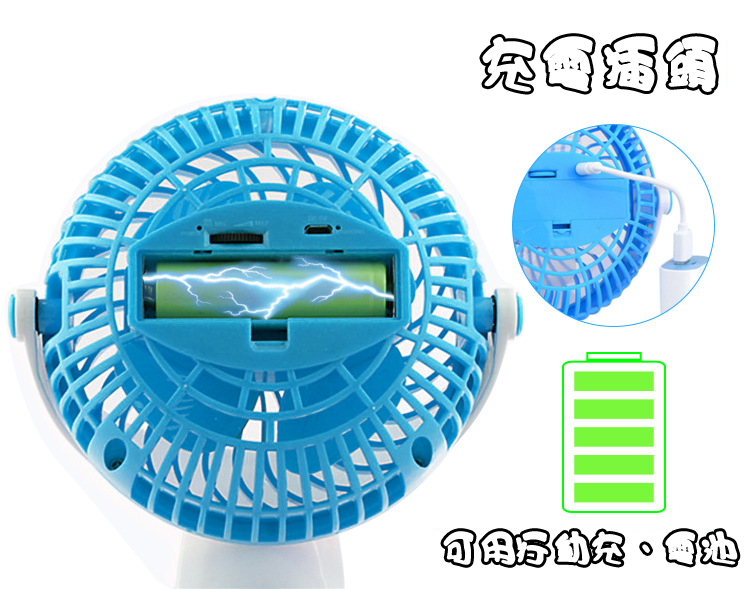
<style>
.page{position:relative;width:750px;height:589px;background:#ffffff}
.page>*{position:absolute;margin:0}
.t1{font:60px "HanWangCC02";letter-spacing:-0.01em;color:#ffffff;font-weight:bold}
.t2{font:36px "HanWangCC02";letter-spacing:-0.01em;color:#ffffff;font-weight:bold}
</style>
<div class="page">
<p class="t1" style="left:482px;top:36px;width:234px;height:56px">充電插頭</p>
<p class="t2" style="left:443px;top:531px;width:295px;height:34px">可用行動充、電池</p>
</div>
